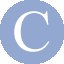
<style>
.page{position:relative;width:64px;height:64px;background:#92a8d1}
.page>*{position:absolute;margin:0}
.t1{font:59px "TimesNewRomanPSMT";color:#ffffff}
</style>
<div class="page">
<p class="t1" style="left:14px;top:11px;width:36px;height:41px">C</p>
</div>
